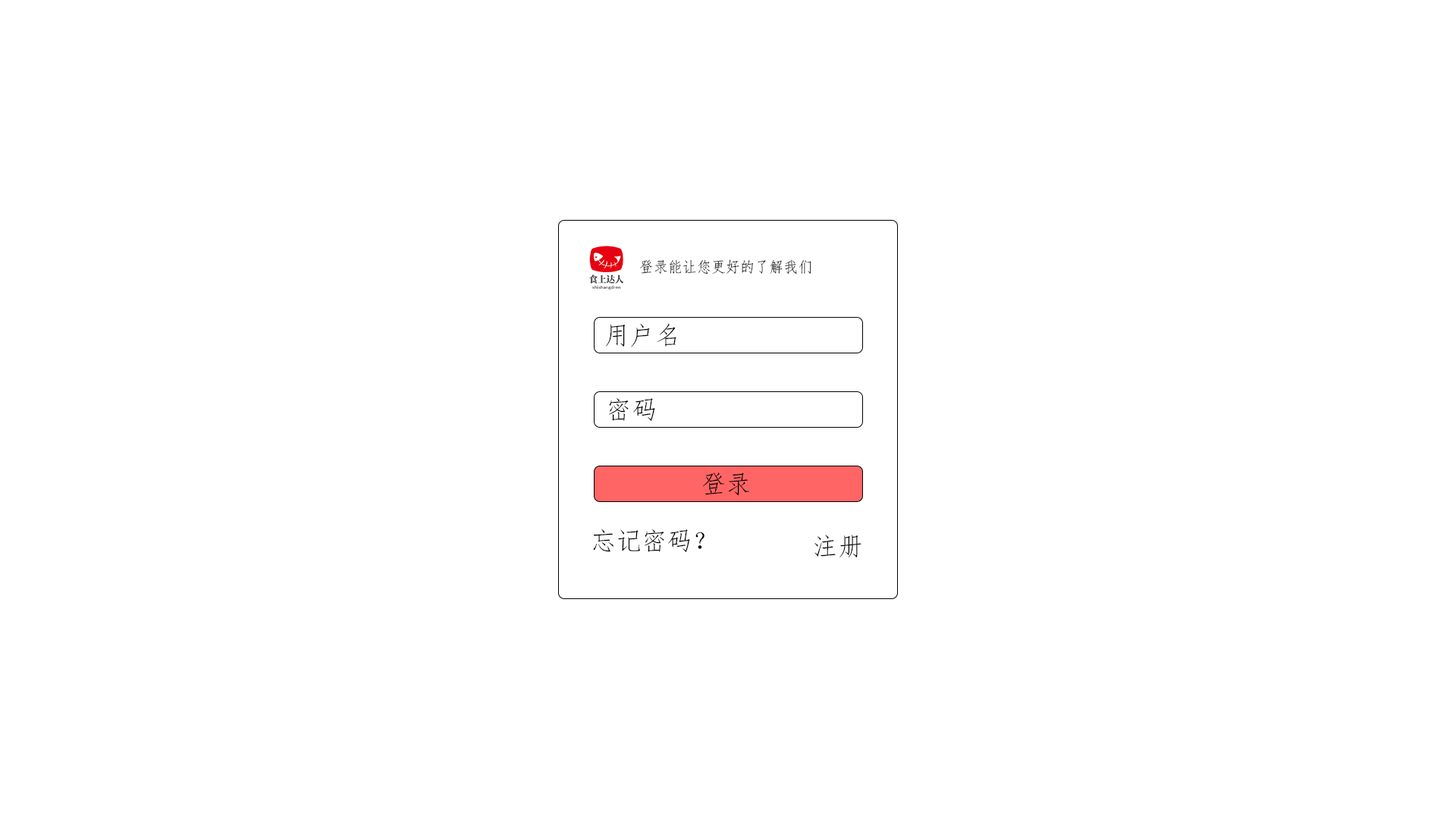
<style>
.page{position:relative;width:1456px;height:819px;background:#ffffff}
.page>*{position:absolute;margin:0}
.t1{font:15.2px "FangSong";color:#000000;scale:0.95 1}
.t2{font:25.3px "FangSong";color:#000000}
</style>
<div class="page">
<p class="t1" style="left:640px;top:259px;width:171px;height:16px">登录能让您更好的了解我们</p>
<p class="t2" style="left:606px;top:323px;width:70px;height:24px">用户名</p>
<p class="t2" style="left:609px;top:398px;width:46px;height:24px">密码</p>
<p class="t2" style="left:703px;top:472px;width:46px;height:24px">登录</p>
<p class="t2" style="left:593px;top:529px;width:111px;height:24px">忘记密码？</p>
<p class="t2" style="left:814px;top:535px;width:47px;height:23px">注册</p>
</div>
